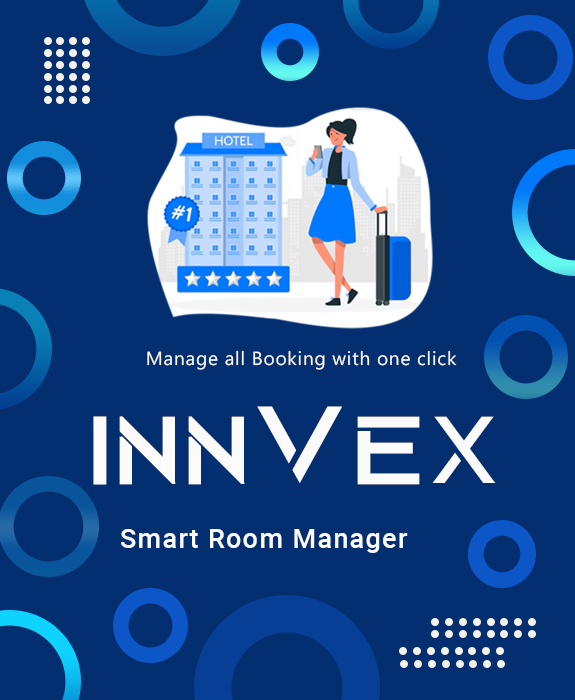
<style>
.page{position:relative;width:575px;height:700px;background:#032e70}
.page>*{position:absolute;margin:0}
.t1{font:19px "MicrosoftPhagsPa";letter-spacing:0.04em;color:#fbfbfc}
.t2{font:99.7px "AquireRegular";letter-spacing:0.04em;color:#fbfbfc;font-weight:bold}
.t3{font:114.6px "AquireRegular";letter-spacing:0.04em;color:#fbfbfc}
.t4{font:99.7px "AquireRegular";letter-spacing:0.04em;color:#fbfbfc}
.t5{font:27.4px "Roboto-Medium";letter-spacing:0.04em;color:#fbfbfc}
</style>
<div class="page">
<p class="t1" style="left:147px;top:350px;width:310px;height:20px">Manage all Booking with one click</p>
<p class="t2" style="left:93px;top:406px;width:403px;height:79px">Inn<span class="t3">v</span>e<span class="t4">x</span></p>
<p class="t5" style="left:121px;top:529px;width:287px;height:24px">Smart Room Manager</p>
</div>
